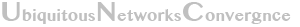
<style>
.page{position:relative;width:300px;height:27px;background:#ffffff}
.page>*{position:absolute;margin:0}
.t1{font:24px "BanglaMN-Bold";color:#c0c0c0}
.t2{font:14px "BanglaMN-Bold";color:#c0c0c0}
</style>
<div class="page">
<p class="t1" style="left:2px;top:2px;width:18px;height:19px">U</p>
<p class="t1" style="left:97px;top:2px;width:18px;height:19px">N</p>
<p class="t1" style="left:183px;top:2px;width:20px;height:19px">C</p>
<p class="t2" style="left:22px;top:9px;width:73px;height:15px">biquitous</p>
<p class="t2" style="left:117px;top:9px;width:64px;height:12px">etworks</p>
<p class="t2" style="left:205px;top:12px;width:86px;height:12px">onvergnce</p>
</div>
